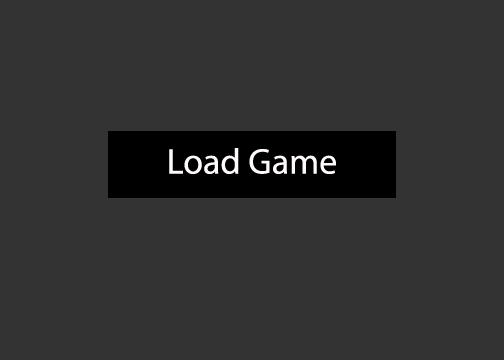
<style>
.page{position:relative;width:504px;height:360px;background:#333333}
.page>*{position:absolute;margin:0}
.t1{font:36px "MyriadPro-Regular";color:#fffbfb}
</style>
<div class="page">
<p class="t1" style="left:169px;top:148px;width:167px;height:26px">Load Game</p>
</div>
